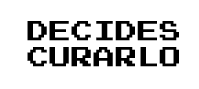
<style>
.page{position:relative;width:199px;height:89px;background:#ffffff}
.page>*{position:absolute;margin:0}
.t1{font:22px "PressStart2P";color:#000000}
</style>
<div class="page">
<p class="t1" style="left:27px;top:21px;width:152px;height:46px;text-align:center">DECIDES<br>CURARLO</p>
</div>
